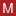
<style>
.page{position:relative;width:16px;height:16px;background:#aa2023}
.page>*{position:absolute;margin:0}
.t1{font:14px "Gulim";color:#ffffff}
</style>
<div class="page">
<p class="t1" style="left:3px;top:3px;width:10px;height:10px">M</p>
</div>
